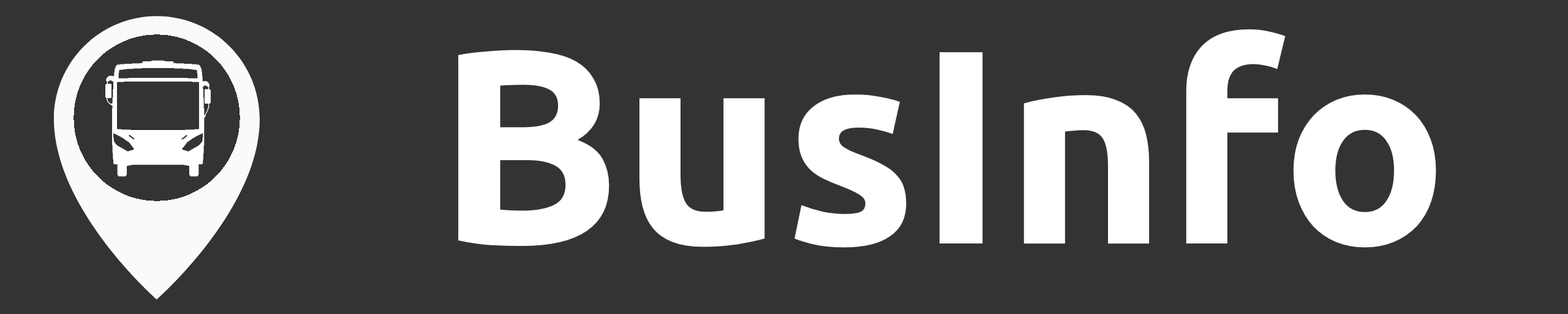
<style>
.page{position:relative;width:1568px;height:314px;background:#333333}
.page>*{position:absolute;margin:0}
.t1{font:275.6px "Ubuntu-Bold";color:#ffffff}
</style>
<div class="page">
<p class="t1" style="left:458px;top:29px;width:978px;height:218px">BusInfo</p>
</div>
